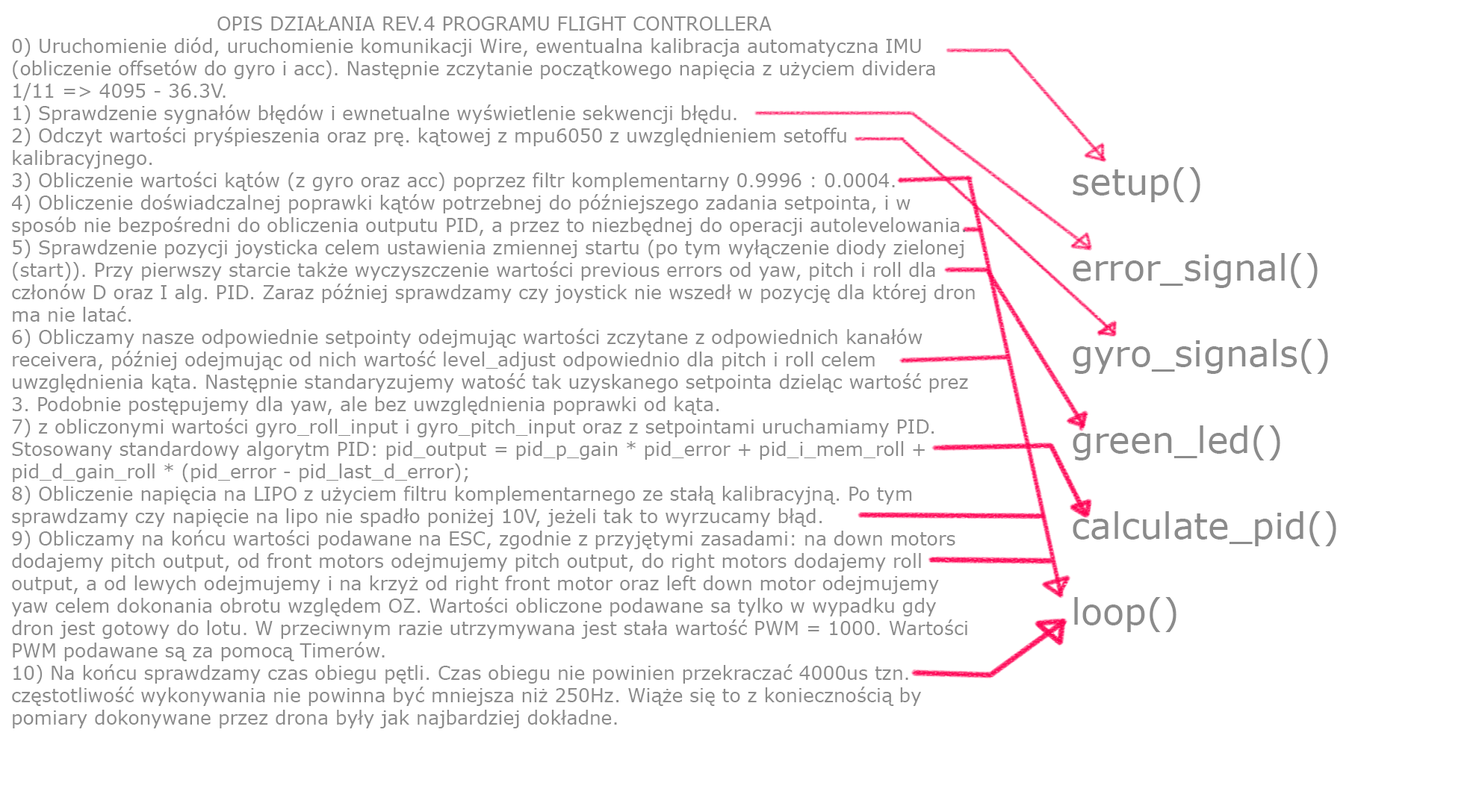
<style>
.page{position:relative;width:1479px;height:806px;background:#ffffff}
.page>*{position:absolute;margin:0}
.t1{font:18.7px "Verdana";color:#8b8b8b}
.t2{font:35.8px "Verdana";color:#8b8b8b}
</style>
<div class="page">
<p class="t1" style="left:11px;top:16px;width:964px;height:713px;text-align:center">OPIS DZIAŁANIA REV.4 PROGRAMU FLIGHT CONTROLLERA<br>0) Uruchomienie diód, uruchomienie komunikacji Wire, ewentualna kalibracja automatyczna IMU (obliczenie offsetów do gyro i acc). Następnie zczytanie początkowego napięcia z użyciem dividera 1/11 =&gt; 4095 - 36.3V.<br>1) Sprawdzenie sygnałów błędów i ewnetualne wyświetlenie sekwencji błędu.<br>2) Odczyt wartości pryśpieszenia oraz prę. kątowej z mpu6050 z uwzględnieniem setoffu kalibracyjnego.<br>3) Obliczenie wartości kątów (z gyro oraz acc) poprzez filtr komplementarny 0.9996 : 0.0004.<br>4) Obliczenie doświadczalnej poprawki kątów potrzebnej do późniejszego zadania setpointa, i w sposób nie bezpośredni do obliczenia outputu PID, a przez to niezbędnej do operacji autolevelowania.<br>5) Sprawdzenie pozycji joysticka celem ustawienia zmiennej startu (po tym wyłączenie diody zielonej (start)). Przy pierwszy starcie także wyczyszczenie wartości previous errors od yaw, pitch i roll dla członów D oraz I alg. PID. Zaraz później sprawdzamy czy joystick nie wszedł w pozycję dla której dron ma nie latać.<br>6) Obliczamy nasze odpowiednie setpointy odejmując wartości zczytane z odpowiednich kanałów receivera, później odejmując od nich wartość level_adjust odpowiednio dla pitch i roll celem uwzględnienia kąta. Następnie standaryzujemy watość tak uzyskanego setpointa dzieląc wartość prez 3. Podobnie postępujemy dla yaw, ale bez uwzględnienia poprawki od kąta.<br>7) z obliczonymi wartości gyro_roll_input i gyro_pitch_input oraz z setpointami uruchamiamy PID. Stosowany standardowy algorytm PID: pid_output = pid_p_gain * pid_error + pid_i_mem_roll + pid_d_gain_roll * (pid_error - pid_last_d_error);<br>8) Obliczenie napięcia na LIPO z użyciem filtru komplementarnego ze stałą kalibracyjną. Po tym sprawdzamy czy napięcie na lipo nie spadło poniżej 10V, jeżeli tak to wyrzucamy błąd.<br>9) Obliczamy na końcu wartości podawane na ESC, zgodnie z przyjętymi zasadami: na down motors dodajemy pitch output, od front motors odejmujemy pitch output, do right motors dodajemy roll output, a od lewych odejmujemy i na krzyż od right front motor oraz left down motor odejmujemy yaw celem dokonania obrotu względem OZ. Wartości obliczone podawane sa tylko w wypadku gdy dron jest gotowy do lotu. W przeciwnym razie utrzymywana jest stała wartość PWM = 1000. Wartości PWM podawane są za pomocą Timerów.<br>10) Na końcu sprawdzamy czas obiegu pętli. Czas obiegu nie powinien przekraczać 4000us tzn. częstotliwość wykonywania nie powinna być mniejsza niż 250Hz. Wiąże się to z koniecznością by pomiary dokonywane przez drona były jak najbardziej dokładne.</p>
<p class="t2" style="left:1072px;top:167px;width:264px;height:465px">setup()<br><br>error_signal()<br><br>gyro_signals()<br><br>green_led()<br><br>calculate_pid()<br><br>loop()</p>
</div>
